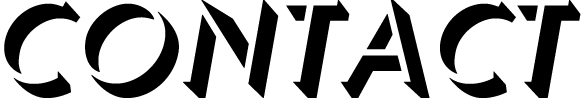
<style>
.page{position:relative;width:585px;height:98px;background:#ffffff}
.page>*{position:absolute;margin:0}
.t1{font:130px "UmbraStd";color:#000000;font-style:italic}
</style>
<div class="page">
<p class="t1" style="left:4px;top:0px;width:577px;height:98px">contact</p>
</div>
